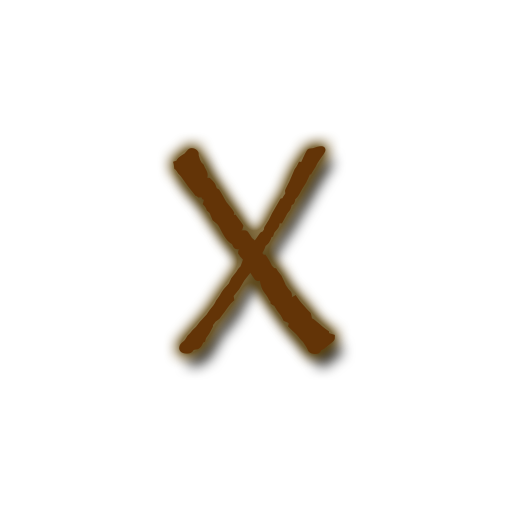
<style>
.page{position:relative;width:512px;height:512px;background:#ffffff}
.page>*{position:absolute;margin:0}
.t1{font:208.3px "Papyrus-Regular";color:#633407;font-weight:bold}
</style>
<div class="page">
<p class="t1" style="left:173px;top:146px;width:162px;height:208px">X</p>
</div>
